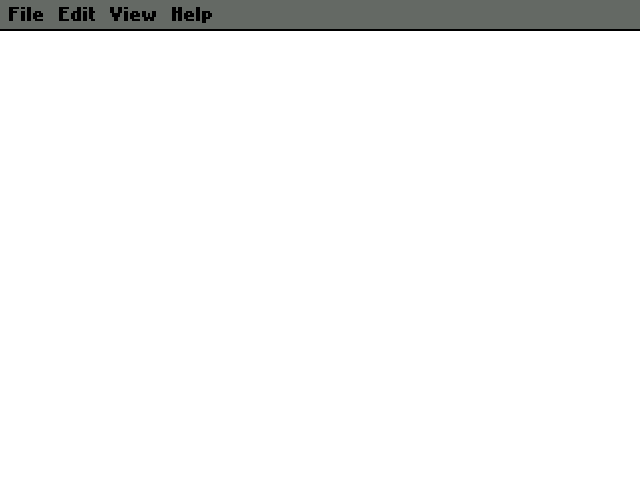
<style>
.page{position:relative;width:640px;height:480px;background:#ffffff}
.page>*{position:absolute;margin:0}
.t1{font:16px "NokiaCellphoneFC-Small";color:#000000}
</style>
<div class="page">
<p class="t1" style="left:9px;top:7px;width:34px;height:14px">File</p>
<p class="t1" style="left:59px;top:7px;width:36px;height:14px">Edit</p>
<p class="t1" style="left:110px;top:7px;width:46px;height:14px">View</p>
<p class="t1" style="left:172px;top:7px;width:40px;height:16px">Help</p>
</div>
